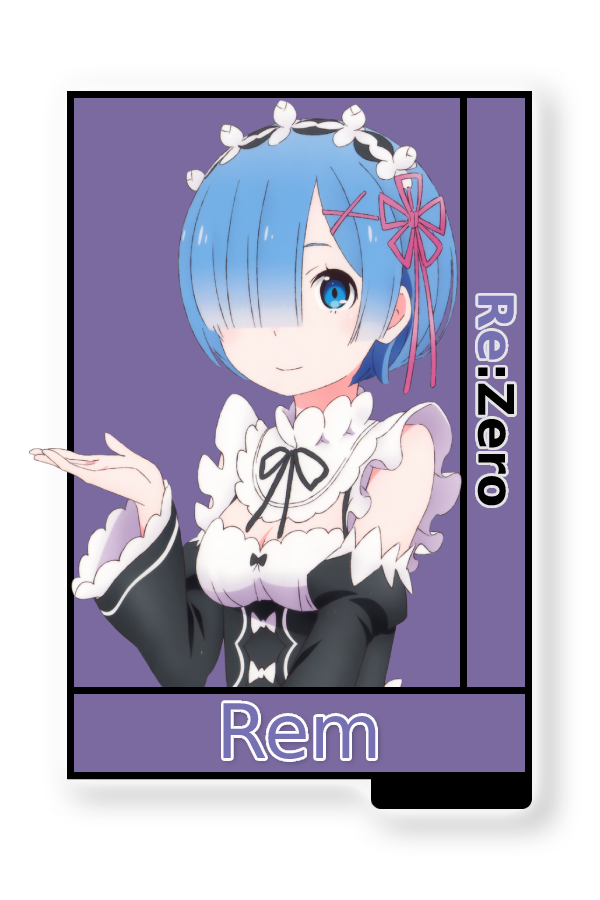
<style>
.page{position:relative;width:600px;height:900px;background:#7a6aa0}
.page>*{position:absolute;margin:0}
.t1{font:48.8px "MADETOMMY-Bold";color:#000000}
.t2{font:48.8px "MADETOMMY-Bold";color:#7671b3}
.t3{font:75px "CoolveticaRg-Regular";color:#7671b3}
</style>
<div class="page">
<p class="t1" style="left:477px;top:295px;width:37px;height:211px;rotate:90deg"><span class="t2">Re</span>:Zero</p>
<p class="t3" style="left:223px;top:703px;width:153px;height:57px">Rem</p>
</div>
